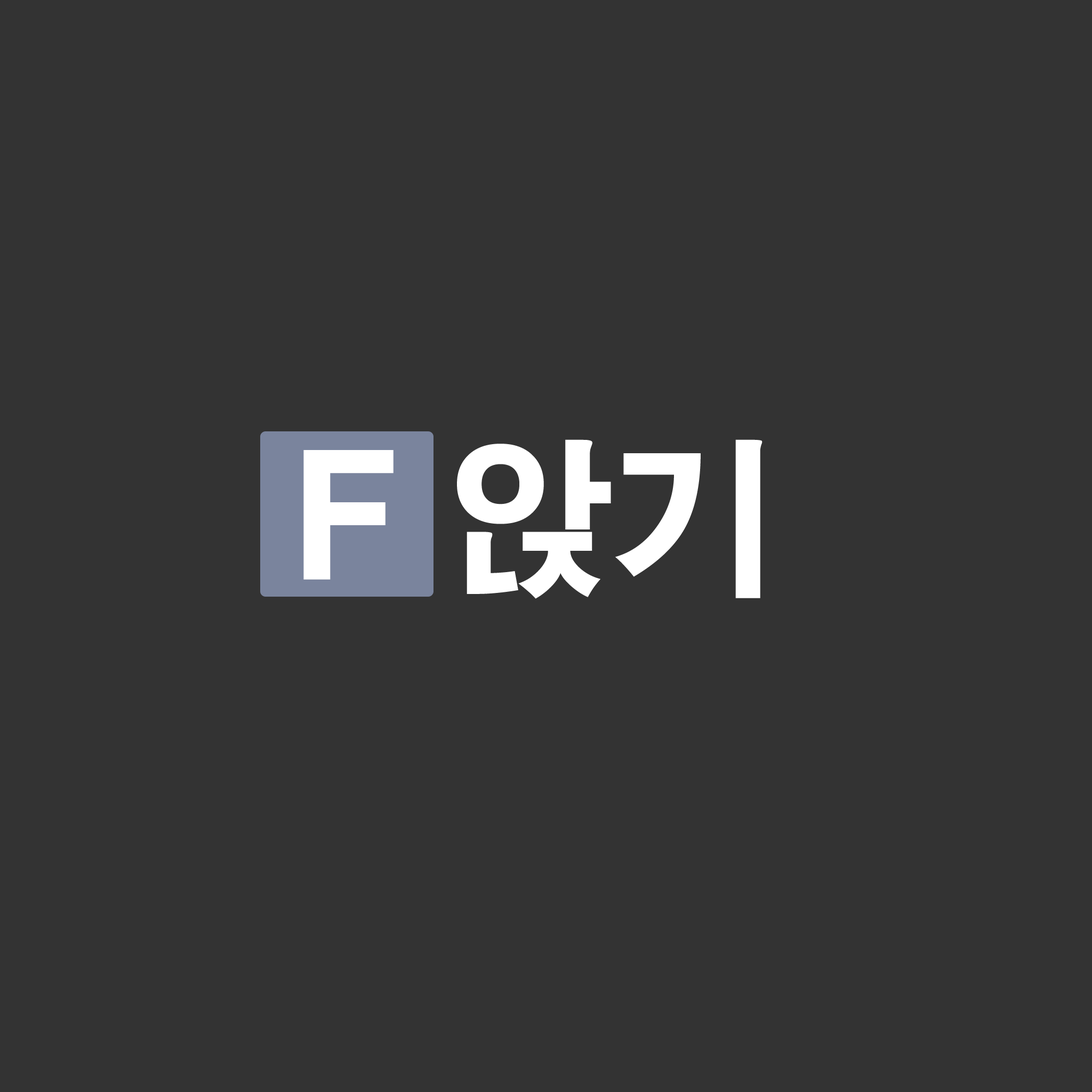
<style>
.page{position:relative;width:1092px;height:1092px;background:#333333}
.page>*{position:absolute;margin:0}
.t1{font:168.7px "H2gtrE";letter-spacing:-0.033em;color:#ffffff}
</style>
<div class="page">
<p class="t1" style="left:303px;top:439px;width:459px;height:160px">F 앉기</p>
</div>
